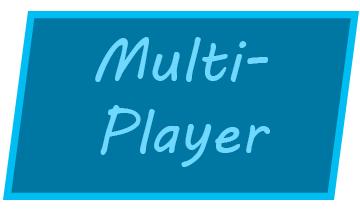
<style>
.page{position:relative;width:360px;height:216px;background:#0076a3}
.page>*{position:absolute;margin:0}
.t1{font:60px "MVBoli";color:#6ed9ff}
</style>
<div class="page">
<p class="t1" style="left:95px;top:37px;width:176px;height:130px;text-align:center">Multi- <br>Player</p>
</div>
